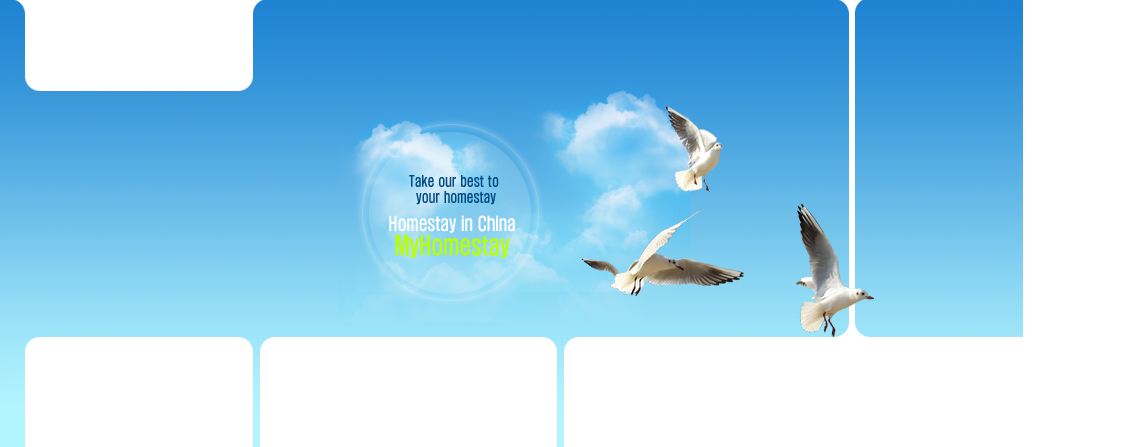
<style>
.page{position:relative;width:1136px;height:447px;background:#ffffff}
.page>*{position:absolute;margin:0}
.t1{font:14px/16px "H2hdrM";color:#004a84;scale:0.8 1}
.t2{font:18px/18px "H2hdrM";color:#ffffff;scale:0.8 1}
.t3{font:24px/24px "H2hdrM";color:#baff00;scale:0.8 1}
</style>
<div class="page">
<p class="t1" style="left:409px;top:175px;width:90px;height:30px;text-align:center">Take our best to <br>your homestay</p>
<p class="t2" style="left:389px;top:215px;width:126px;height:43px;text-align:center">Homestay in China<br><span class="t3">MyHomestay</span></p>
</div>
